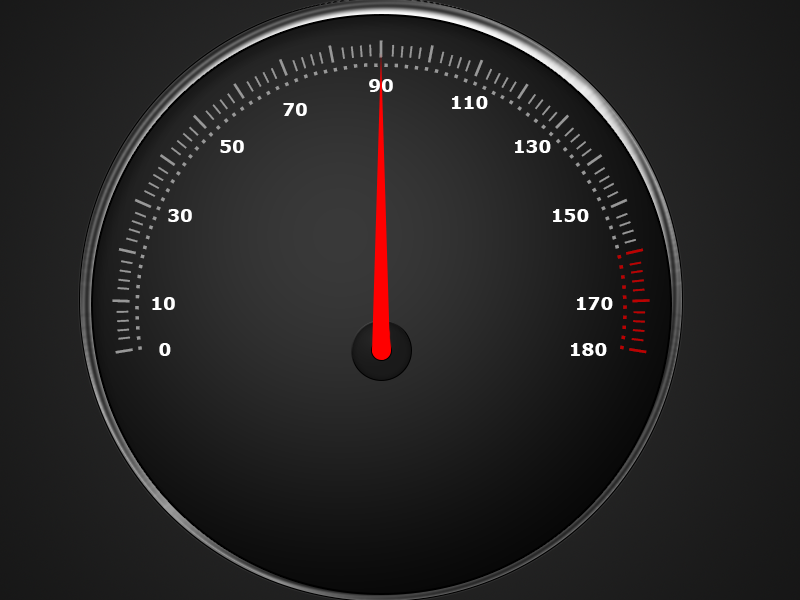
<style>
.page{position:relative;width:800px;height:600px}
.page>*{position:absolute;margin:0}
.t1{font:18px "Verdana-Bold";color:#ffffff}
.t2{font:18px "Verdana-Bold";letter-spacing:0.05em;color:#ffffff}
</style>
<div class="page">
<p class="t1" style="left:369px;top:79px;width:24px;height:13px">90</p>
<p class="t1" style="left:452px;top:96px;width:36px;height:13px">110</p>
<p class="t1" style="left:283px;top:103px;width:24px;height:13px">70</p>
<p class="t1" style="left:220px;top:140px;width:24px;height:13px">50</p>
<p class="t1" style="left:515px;top:140px;width:36px;height:13px">130</p>
<p class="t1" style="left:168px;top:209px;width:24px;height:13px">30</p>
<p class="t1" style="left:553px;top:209px;width:36px;height:13px">150</p>
<p class="t1" style="left:152px;top:297px;width:23px;height:13px">10</p>
<p class="t1" style="left:577px;top:297px;width:36px;height:13px">170</p>
<p class="t2" style="left:159px;top:343px;width:12px;height:13px">0</p>
<p class="t1" style="left:571px;top:343px;width:36px;height:13px">180</p>
</div>
